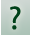
<style>
.page{position:relative;width:30px;height:35px}
.page>*{position:absolute;margin:0}
.t1{font:33px "MyriadPro-Regular";color:#004018}
</style>
<div class="page">
<p class="t1" style="left:10px;top:6px;width:11px;height:24px">?</p>
</div>
